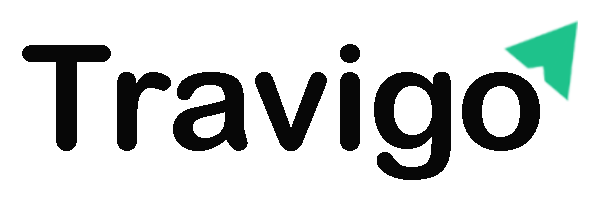
<style>
.page{position:relative;width:600px;height:200px;background:#ffffff}
.page>*{position:absolute;margin:0}
.t1{font:146.2px "ArialRoundedMTBold";color:#070707}
</style>
<div class="page">
<p class="t1" style="left:22px;top:44px;width:518px;height:136px">Travigo</p>
</div>
